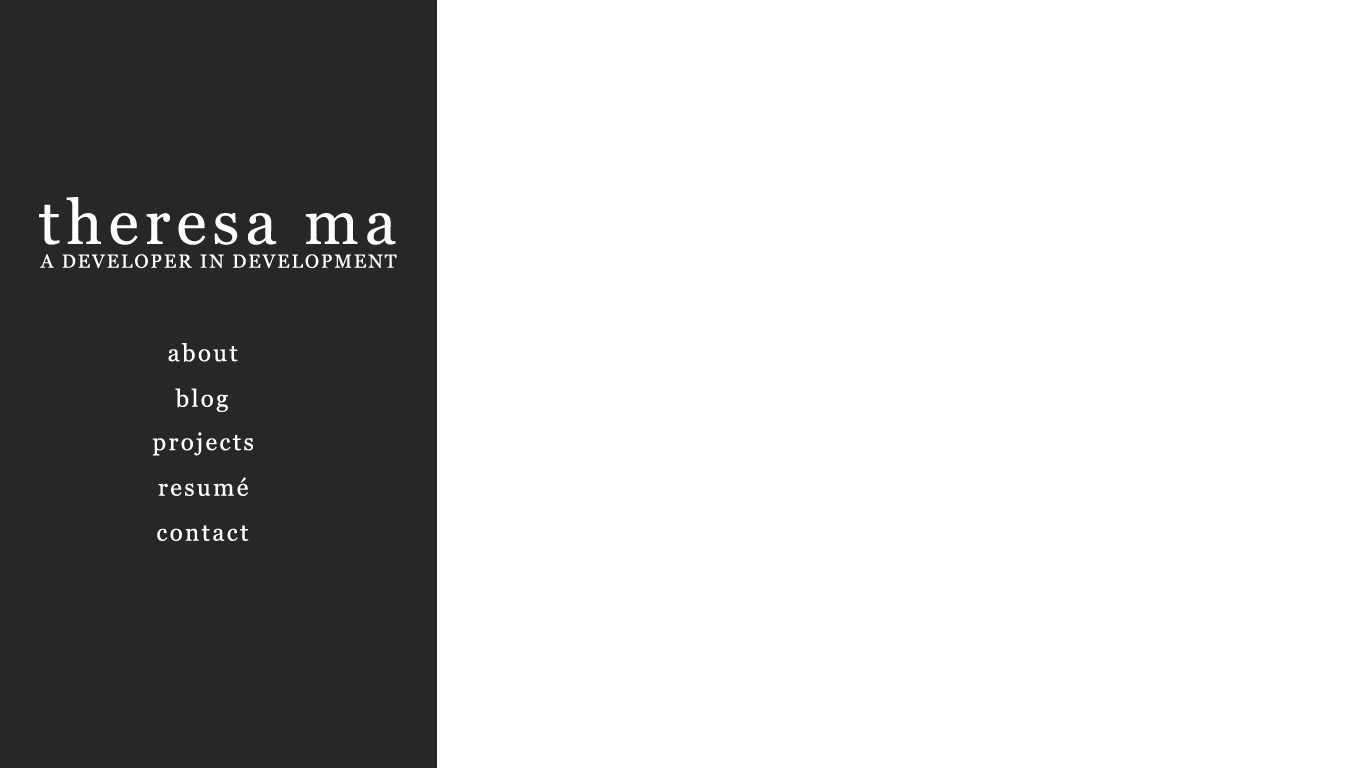
<style>
.page{position:relative;width:1366px;height:768px;background:#ffffff}
.page>*{position:absolute;margin:0}
.t1{font:62px "Vani";letter-spacing:0.1em;color:#ffffff}
.t2{font:19px "Vani";letter-spacing:0.1em;color:#ffffff}
.t3{font:24px "Vani";letter-spacing:0.1em;color:#ffffff}
</style>
<div class="page">
<p class="t1" style="left:39px;top:197px;width:357px;height:48px">theresa ma</p>
<p class="t2" style="left:40px;top:254px;width:357px;height:15px">A DEVELOPER IN DEVELOPMENT</p>
<p class="t3" style="left:168px;top:343px;width:70px;height:19px">about</p>
<p class="t3" style="left:175px;top:388px;width:53px;height:24px">blog</p>
<p class="t3" style="left:152px;top:432px;width:101px;height:24px">projects</p>
<p class="t3" style="left:158px;top:477px;width:90px;height:19px">resumé</p>
<p class="t3" style="left:157px;top:525px;width:92px;height:16px">contact</p>
</div>
